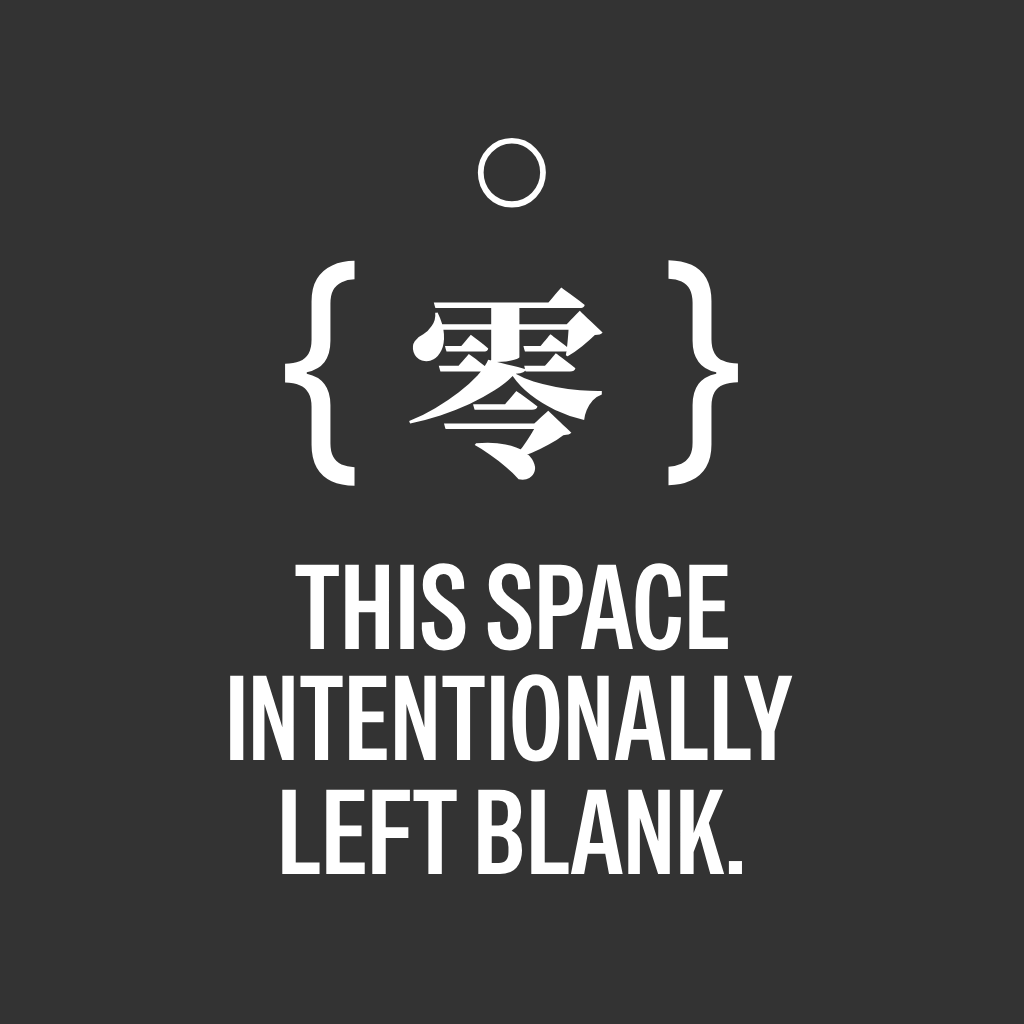
<style>
.page{position:relative;width:1024px;height:1024px;background:#333333}
.page>*{position:absolute;margin:0}
.t1{font:83.6px "DroidSansFallback";color:#ffffff;scale:0.93 1}
.t2{font:258.1px "NotoSans-Regular";color:#ffffff;scale:0.84 1}
.t3{font:198.6px "ChironSungHK-Black";color:#ffffff}
.t4{font:118.8px "SpecialGothicCondensedOne-Regular";color:#ffffff}
.t5{font:118.8px "SpecialGothicCondensedOne-Regular";color:#ffffff;scale:0.97 1}
</style>
<div class="page">
<p class="t1" style="left:477px;top:138px;width:69px;height:70px">〇</p>
<p class="t2" style="left:285px;top:260px;width:70px;height:226px">{</p>
<p class="t2" style="left:668px;top:260px;width:70px;height:226px;rotate:180deg">{</p>
<p class="t3" style="left:409px;top:287px;width:194px;height:193px">零</p>
<p class="t4" style="left:295px;top:563px;width:433px;height:88px">THIS SPACE</p>
<p class="t5" style="left:230px;top:674px;width:563px;height:88px">INTENTIONALLY</p>
<p class="t4" style="left:282px;top:789px;width:460px;height:85px">LEFT BLANK.</p>
</div>
